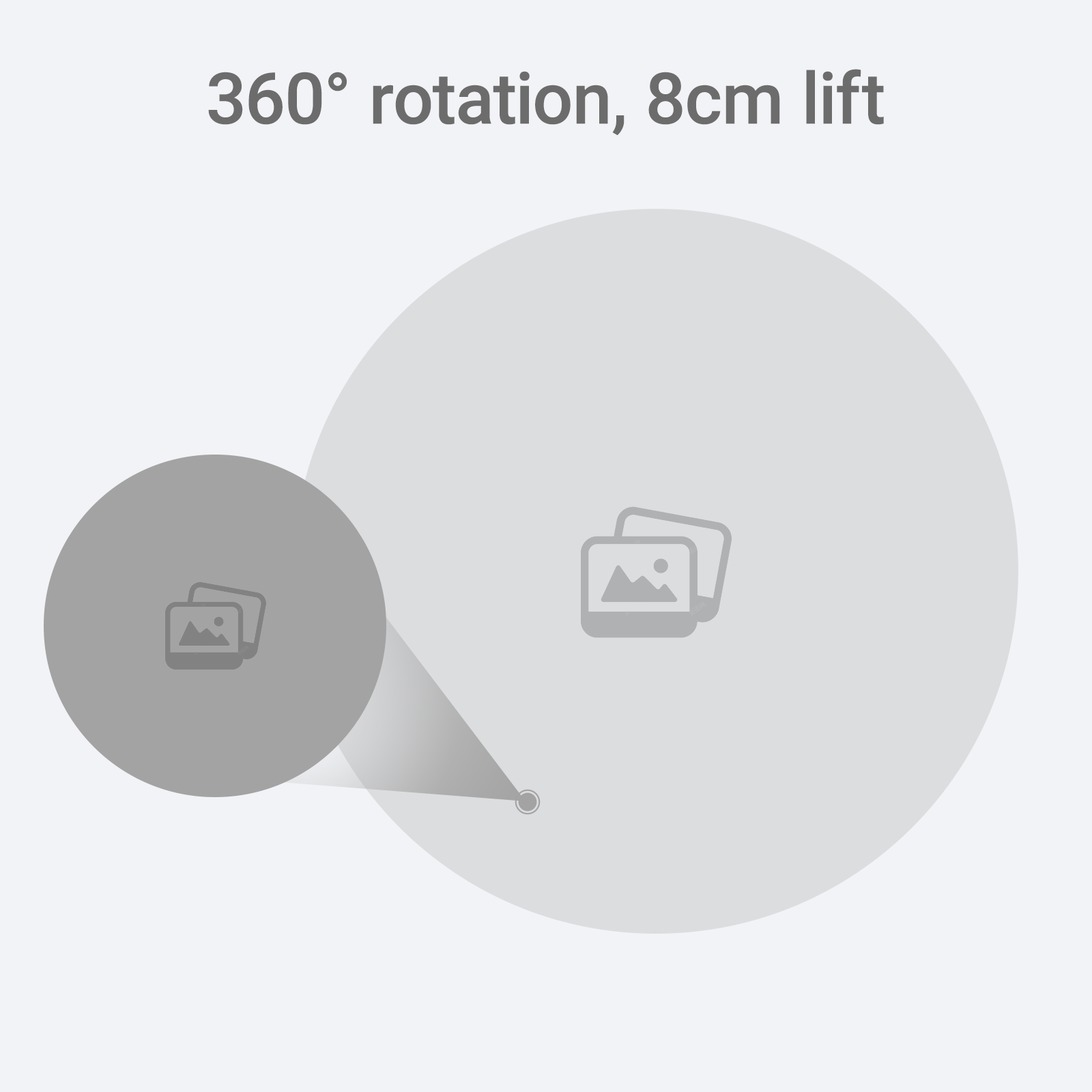
<style>
.page{position:relative;width:1092px;height:1092px;background:#f2f3f6}
.page>*{position:absolute;margin:0}
.t1{font:71.3px "Roboto-Medium";color:#6c6c6c}
</style>
<div class="page">
<p class="t1" style="left:208px;top:69px;width:676px;height:66px">360° rotation, 8cm lift</p>
</div>
